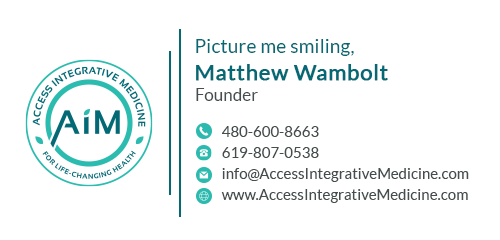
<style>
.page{position:relative;width:500px;height:240px;background:#ffffff}
.page>*{position:absolute;margin:0}
.t1{font:18.8px "Lato-Regular";letter-spacing:0.015em;color:#036975}
.t2{font:21.5px "Lato-Regular";letter-spacing:0.025em;color:#036975;font-weight:bold}
.t3{font:16.7px "Lato-Regular";letter-spacing:0.015em;color:#464d4e}
.t4{font:14.6px/20.8px "Lato-Regular";letter-spacing:0.015em;color:#464d4e}
</style>
<div class="page">
<p class="t1" style="left:196px;top:39px;width:158px;height:17px">Picture me smiling,</p>
<p class="t2" style="left:196px;top:64px;width:192px;height:17px">Matthew Wambolt</p>
<p class="t3" style="left:196px;top:88px;width:62px;height:13px">Founder</p>
<p class="t4" style="left:221px;top:126px;width:248px;height:77px">480-600-8663<br>619-807-0538<br>info@AccessIntegrativeMedicine.com<br>www.AccessIntegrativeMedicine.com</p>
</div>
